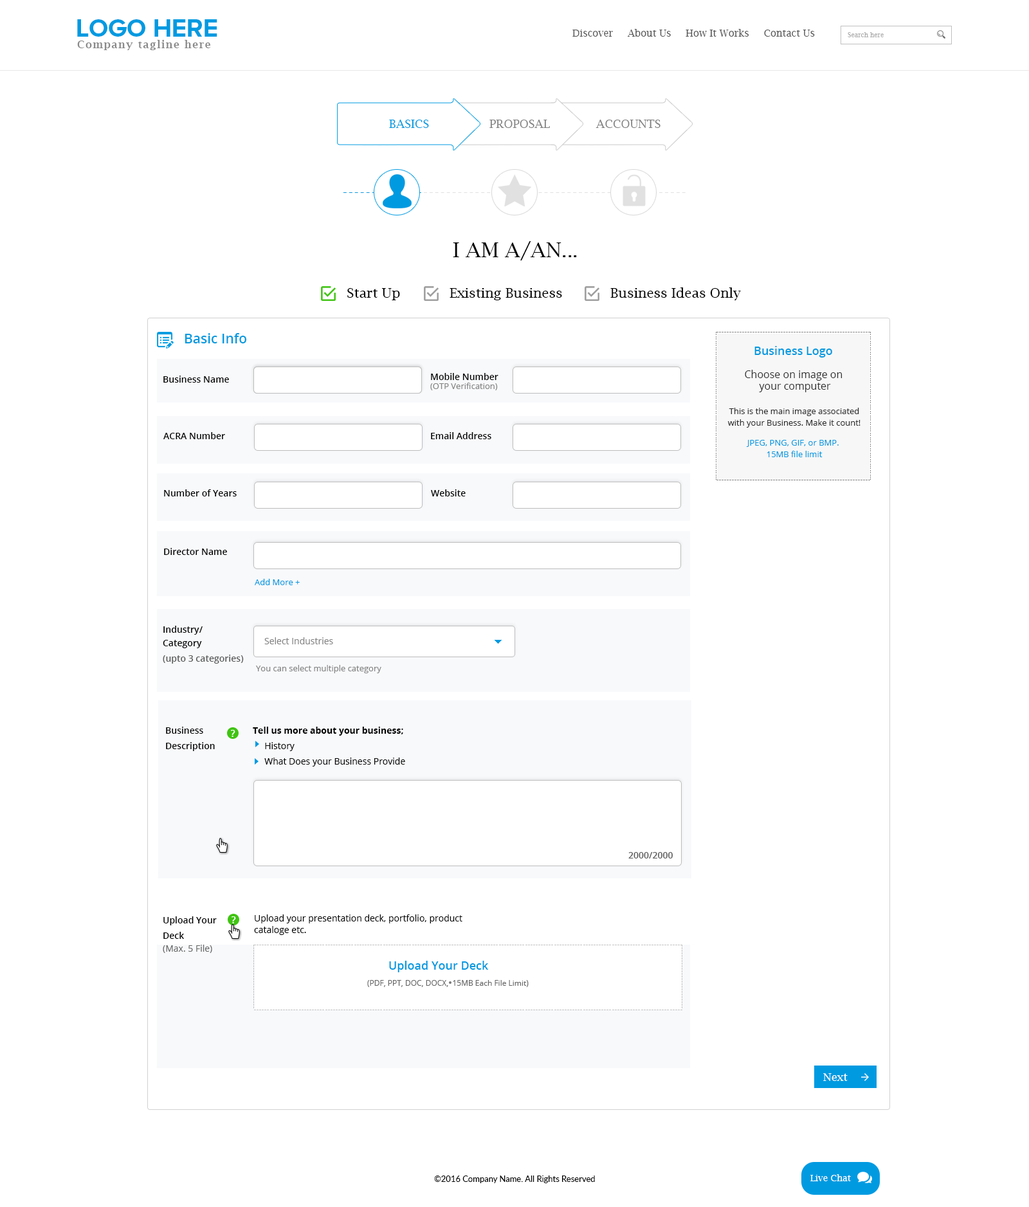
<style>
.page{position:relative;width:1029px;height:1207px;background:#ffffff}
.page>*{position:absolute;margin:0}
.t1{font:25.7px "ProximaNovaA-Bold";color:#009ae1;text-transform:uppercase}
.t2{font:9.6px "LucidaBright";color:#585858}
.t3{font:10.3px "LucidaBright-Demi";letter-spacing:0.1em;color:#898989}
.t4{font:6.4px "LucidaBright";color:#afafaf}
.t5{font:11.6px "LucidaBright";color:#009ae1}
.t6{font:11.6px "LucidaBright";color:#818181}
.t7{font:11.6px "LucidaBright";color:#818181;text-transform:uppercase}
.t8{font:13.5px "LucidaBright";letter-spacing:0.1em;color:#e1e1e1}
.t9{font:13.5px "LucidaBright";letter-spacing:0.1em;color:#009ae1}
.t10{font:20.6px "LucidaBright";color:#000000;text-transform:uppercase}
.t11{font:13.5px "LucidaBright";color:#000000}
.t12{font:13.5px "OpenSans-Semibold";color:#009ae1}
.t13{font:7.7px "ArialMT";color:#888888;scale:0.85 1}
.t14{font:7.7px "ArialMT";color:#888888}
.t15{font:11.6px "OpenSans-Semibold";color:#009ae1}
.t16{font:9px "OpenSans-Semibold";color:#000000}
.t17{font:10.3px/11.6px "OpenSans";color:#2e2e2e}
.t18{font:8.4px "OpenSans";color:#838383}
.t19{font:8.4px/11.6px "OpenSans";color:#2e2e2e}
.t20{font:8.4px/11.6px "OpenSans";color:#009ae1}
.t21{font:6.6px "ArialMT";color:#888888;scale:1.17 1}
.t22{font:8.4px "OpenSans";color:#009ae1}
.t23{font:9px/13.5px "OpenSans-Semibold";color:#000000}
.t24{font:9px "OpenSans";color:#838383}
.t25{font:9px "OpenSans-Semibold";color:#5a5a5a}
.t26{font:9px/15.4px "OpenSans-Semibold";color:#000000}
.t27{font:9.5px "OpenSans-Semibold";color:#ffffff}
.t28{font:9px/15.4px "OpenSans";color:#000000}
.t29{font:9px/13.5px "OpenSans-Bold";color:#000000}
.t30{font:9px/11.6px "OpenSans";color:#000000}
.t31{font:9px "OpenSans";color:#666666}
.t32{font:7.2px "ArialMT";color:#c2c2c2}
.t33{font:7.1px "ArialMT";color:#c2c2c2}
.t34{font:7.7px "OpenSans";color:#666666}
.t35{font:10.9px "LucidaBright";color:#ffffff}
.t36{font:8.4px "Lato-Regular";color:#000000}
.t37{font:9px "LucidaBright";color:#ffffff}
</style>
<div class="page">
<p class="t1" style="left:77px;top:19px;width:140px;height:18px">Logo HERE</p>
<p class="t2" style="left:572px;top:29px;width:243px;height:8px">Discover     About Us     How It Works     Contact Us</p>
<p class="t3" style="left:77px;top:40px;width:133px;height:10px">Company tagline here</p>
<p class="t4" style="left:847px;top:32px;width:36px;height:5px">Search here</p>
<p class="t5" style="left:389px;top:120px;width:40px;height:8px">BASICS</p>
<p class="t6" style="left:489px;top:120px;width:61px;height:8px">PROPOSAL</p>
<p class="t7" style="left:595px;top:120px;width:65px;height:8px">Accounts</p>
<p class="t8" style="left:343px;top:192px;width:342px;height:1px"><span class="t9">--------------</span>----------------------------------------------</p>
<p class="t10" style="left:453px;top:241px;width:124px;height:19px">I AM A/AN...</p>
<p class="t11" style="left:347px;top:288px;width:53px;height:12px">Start Up</p>
<p class="t11" style="left:449px;top:288px;width:113px;height:12px">Existing Business</p>
<p class="t11" style="left:610px;top:287px;width:131px;height:13px">Business Ideas Only</p>
<p class="t12" style="left:185px;top:333px;width:61px;height:10px">Basic Info</p>
<p class="t13" style="left:716px;top:332px;width:0px;height:148px;rotate:90deg">--------------------------------------------------------------------</p>
<p class="t14" style="left:716px;top:332px;width:154px;height:0px">------------------------------------------------------------</p>
<p class="t13" style="left:870px;top:332px;width:0px;height:148px;rotate:90deg">--------------------------------------------------------------------</p>
<p class="t15" style="left:754px;top:346px;width:78px;height:11px">Business Logo</p>
<p class="t16" style="left:163px;top:375px;width:66px;height:7px">Business Name</p>
<p class="t16" style="left:431px;top:373px;width:67px;height:7px">Mobile Number</p>
<p class="t17" style="left:744px;top:370px;width:98px;height:22px;text-align:center">Choose on image on <br>your computer</p>
<p class="t18" style="left:430px;top:382px;width:68px;height:8px">(OTP Verification)</p>
<p class="t19" style="left:727px;top:408px;width:133px;height:20px;text-align:center">This is the main image associated with your Business. Make it count!</p>
<p class="t16" style="left:163px;top:432px;width:62px;height:7px">ACRA Number</p>
<p class="t16" style="left:431px;top:432px;width:60px;height:7px">Email Address</p>
<p class="t20" style="left:746px;top:440px;width:92px;height:17px;text-align:center">JPEG, PNG, GIF, or BMP. <br>15MB file limit</p>
<p class="t21" style="left:716px;top:480px;width:154px;height:0px">------------------------------------------------------------</p>
<p class="t16" style="left:164px;top:489px;width:73px;height:7px">Number of Years</p>
<p class="t16" style="left:431px;top:489px;width:34px;height:7px">Website</p>
<p class="t16" style="left:164px;top:548px;width:63px;height:7px">Director Name</p>
<p class="t22" style="left:255px;top:579px;width:45px;height:6px">Add More +</p>
<p class="t23" style="left:163px;top:626px;width:40px;height:22px">Industry/<br>Category</p>
<p class="t24" style="left:264px;top:637px;width:69px;height:7px">Select Industries</p>
<p class="t25" style="left:163px;top:654px;width:81px;height:9px">(upto 3 categories)</p>
<p class="t18" style="left:256px;top:665px;width:125px;height:8px">You can select multiple category</p>
<p class="t26" style="left:166px;top:726px;width:49px;height:25px">Business <br>Description</p>
<p class="t27" style="left:231px;top:730px;width:4px;height:7px">?</p>
<p class="t28" style="left:253px;top:726px;width:152px;height:40px"><span class="t29">Tell us more about your business; <br>     </span>History<br>     What Does your Business Provide</p>
<p class="t25" style="left:628px;top:852px;width:44px;height:6px">2000/2000</p>
<p class="t26" style="left:163px;top:916px;width:54px;height:23px">Upload Your <br>Deck</p>
<p class="t27" style="left:231px;top:916px;width:5px;height:7px">?</p>
<p class="t30" style="left:254px;top:914px;width:208px;height:21px">Upload your presentation deck, portfolio, product<br>cataloge etc.</p>
<p class="t31" style="left:163px;top:944px;width:49px;height:9px">(Max. 5 File)</p>
<p class="t32" style="left:253px;top:944px;width:1px;height:64px;rotate:90deg">-------------------------</p>
<p class="t33" style="left:254px;top:944px;width:428px;height:1px">-------------------------------------------------------------------------------------------------------------------------------------------------------------------</p>
<p class="t33" style="left:681px;top:944px;width:1px;height:64px;rotate:90deg">-------------------------</p>
<p class="t15" style="left:389px;top:960px;width:100px;height:12px">Upload Your Deck</p>
<p class="t34" style="left:367px;top:980px;width:161px;height:7px">(PDF, PPT, DOC, DOCX,  15MB Each File Limit)</p>
<p class="t33" style="left:254px;top:1009px;width:428px;height:1px">-------------------------------------------------------------------------------------------------------------------------------------------------------------------</p>
<p class="t35" style="left:823px;top:1073px;width:24px;height:8px">Next</p>
<p class="t36" style="left:434px;top:1175px;width:161px;height:8px">©2016 Company Name. All Rights Reserved</p>
<p class="t37" style="left:810px;top:1174px;width:41px;height:7px">Live Chat</p>
</div>
